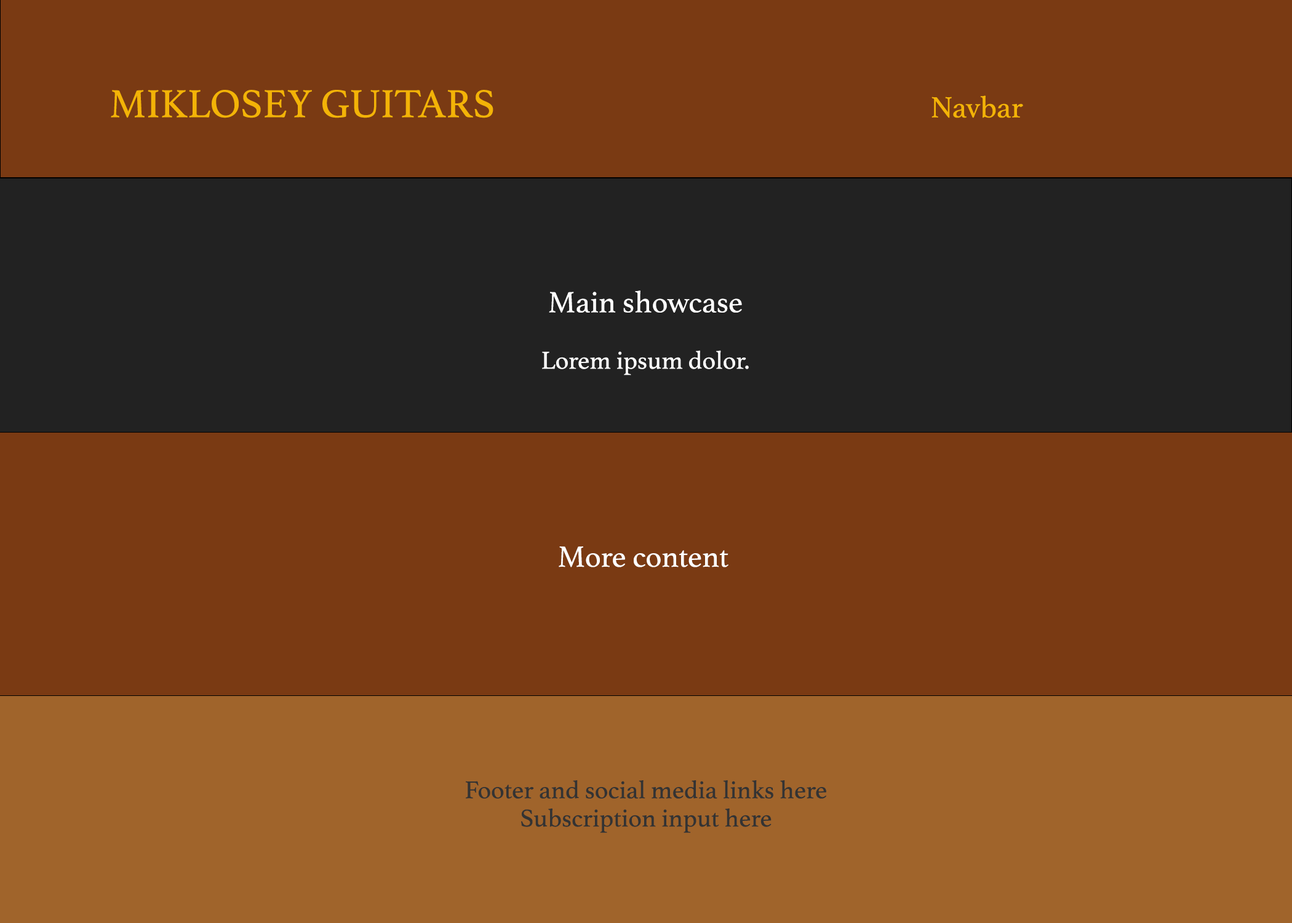
<style>
.page{position:relative;width:1292px;height:923px;background:#7a3a13}
.page>*{position:absolute;margin:0}
.t1{font:41px "Athelas-Regular";color:#f3b307}
.t2{font:30.8px "Athelas-Regular";color:#f3b307}
.t3{font:25.6px/28.2px "Athelas-Regular";color:#ffffff}
.t4{font:30.8px/28.2px "Athelas-Regular";color:#ffffff}
.t5{font:30.8px "Athelas-Regular";color:#ffffff}
.t6{font:25.6px/28.2px "Athelas-Regular";color:#333333}
.t7{font:25.6px/28.2px "Athelas-Regular";color:#2ba089}
</style>
<div class="page">
<p class="t1" style="left:111px;top:90px;width:382px;height:28px">MIKLOSEY GUITARS</p>
<p class="t2" style="left:932px;top:95px;width:91px;height:23px">Navbar</p>
<p class="t3" style="left:542px;top:290px;width:207px;height:85px;text-align:center"><span class="t4"><br><br><br><br>Main showcase<br><br></span>Lorem ipsum dolor.</p>
<p class="t5" style="left:559px;top:546px;width:169px;height:21px">More content</p>
<p class="t6" style="left:466px;top:780px;width:361px;height:53px;text-align:center"><span class="t7"><br><br><br></span>Footer and social media links here<br>Subscription input here</p>
</div>
